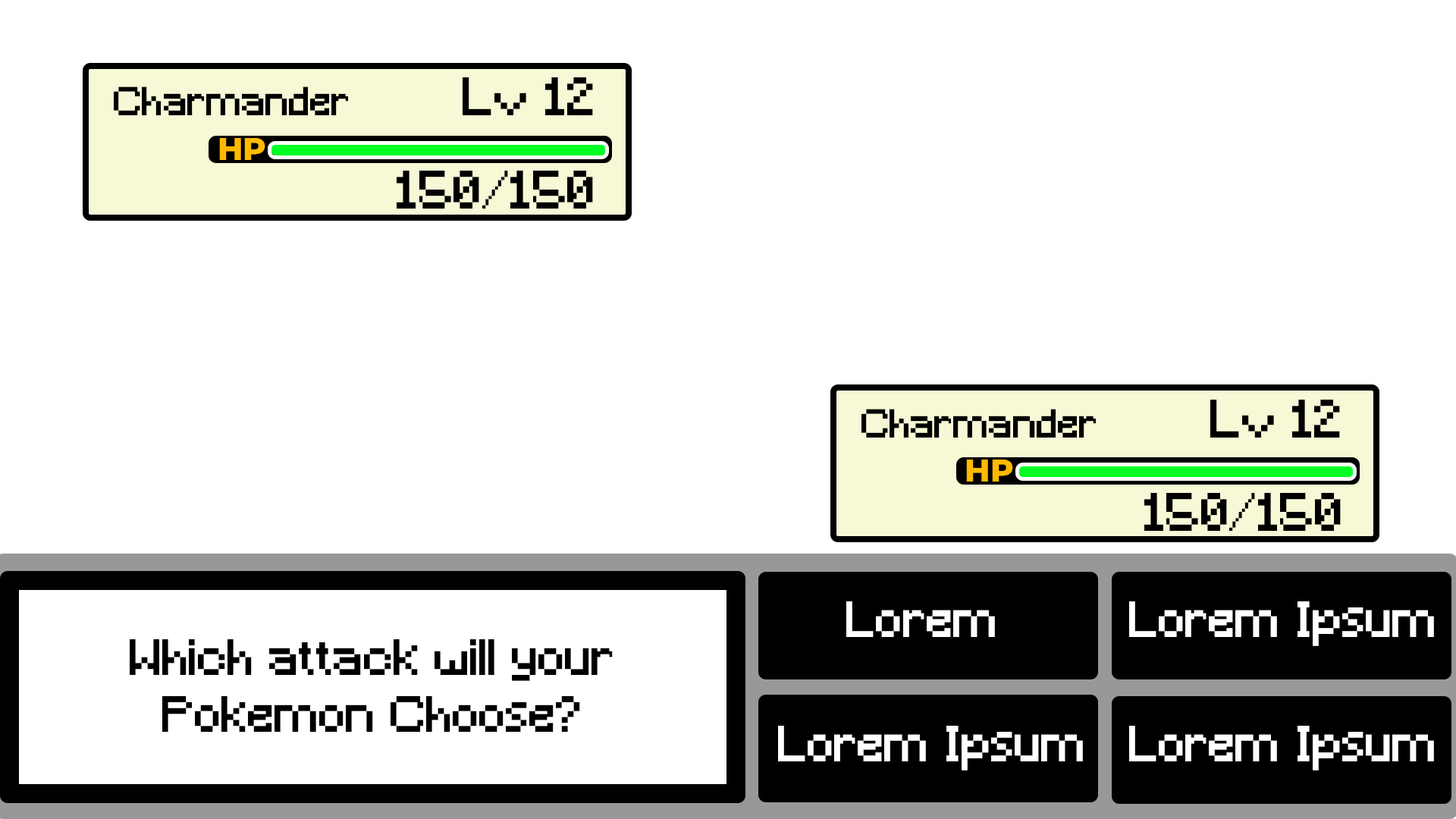
<style>
.page{position:relative;width:1456px;height:819px;background:#ffffff}
.page>*{position:absolute;margin:0}
.t1{font:50.6px "Minecraft";color:#000000}
.t2{font:37.9px "Minecraft";color:#000000}
.t3{font:31.6px "Montserrat-ExtraBold";color:#ffba00}
.t4{font:47.4px "Minecraft";color:#ffffff}
.t5{font:47.4px "Minecraft";color:#000000}
</style>
<div class="page">
<p class="t1" style="left:463px;top:77px;width:130px;height:38px">Lv 12</p>
<p class="t2" style="left:114px;top:86px;width:234px;height:29px">Charmander</p>
<p class="t3" style="left:219px;top:138px;width:46px;height:22px">HP</p>
<p class="t1" style="left:397px;top:171px;width:196px;height:38px">150/150</p>
<p class="t1" style="left:1210px;top:400px;width:130px;height:38px">Lv 12</p>
<p class="t2" style="left:861px;top:409px;width:235px;height:29px">Charmander</p>
<p class="t3" style="left:966px;top:460px;width:47px;height:22px">HP</p>
<p class="t1" style="left:1144px;top:493px;width:197px;height:38px">150/150</p>
<p class="t4" style="left:846px;top:601px;width:149px;height:36px">Lorem</p>
<p class="t4" style="left:1129px;top:601px;width:305px;height:45px">Lorem Ipsum</p>
<p class="t5" style="left:130px;top:639px;width:483px;height:93px;text-align:center">Which attack will your Pokemon Choose?</p>
<p class="t4" style="left:778px;top:726px;width:305px;height:44px">Lorem Ipsum</p>
<p class="t4" style="left:1129px;top:726px;width:305px;height:44px">Lorem Ipsum</p>
</div>
